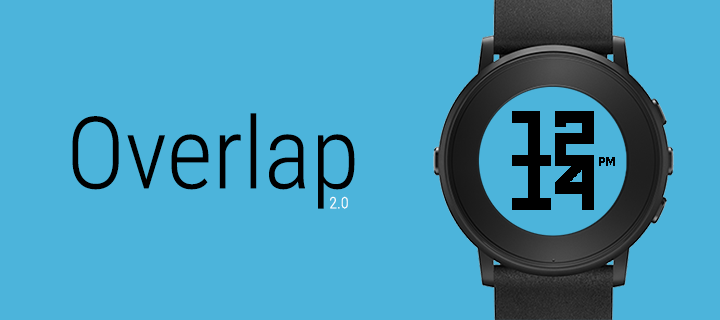
<style>
.page{position:relative;width:720px;height:320px;background:#4cb4db}
.page>*{position:absolute;margin:0}
.t1{font:100px "RobotoCondensed-Light";color:#000000}
.t2{font:16px "RobotoCondensed-Light";color:#ffffff}
</style>
<div class="page">
<p class="t1" style="left:72px;top:113px;width:283px;height:96px">Overlap</p>
<p class="t2" style="left:330px;top:196px;width:18px;height:13px">2.0</p>
</div>
